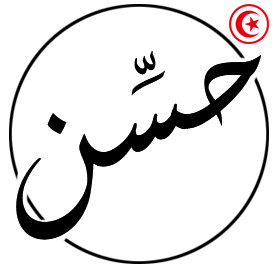
<style>
.page{position:relative;width:279px;height:268px;background:#ffffff}
.page>*{position:absolute;margin:0}
.t1{font:228px "Aldhabi";color:#000000;text-transform:uppercase}
</style>
<div class="page">
<p class="t1" style="left:16px;top:51px;width:246px;height:189px">حسِّن</p>
</div>
